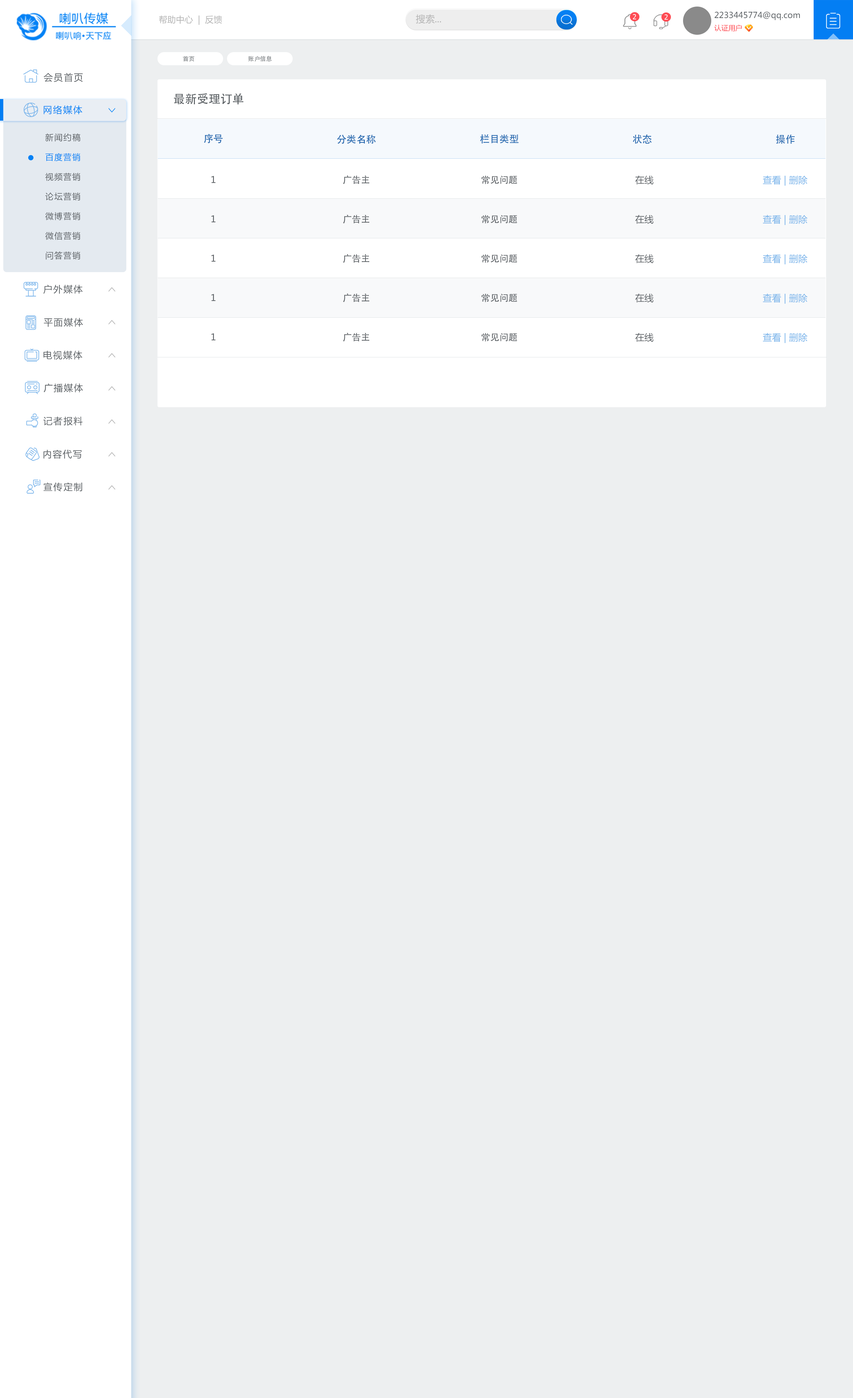
<style>
.page{position:relative;width:853px;height:1398px;background:#edeff0}
.page>*{position:absolute;margin:0}
.t1{font:8.6px "MicrosoftYaHei";color:#b4b4b4}
.t2{font:9.4px "MicrosoftYaHei";color:#b4b4b4}
.t3{font:6.9px "Tahoma";letter-spacing:0.1em;color:#ffffff;text-transform:uppercase}
.t4{font:8.2px/12.3px "MicrosoftYaHei";color:#5c6165}
.t5{font:7.1px/12.3px "MicrosoftYaHei";color:#fe4d55}
.t6{font:5.9px "AdobeHeitiStd-Regular";color:#878b8e}
.t7{font:9.2px "MicrosoftYaHei";letter-spacing:0.1em;color:#5c6165}
.t8{font:11.8px "AdobeHeitiStd-Regular";color:#5c6165}
.t9{font:9.2px "MicrosoftYaHei";letter-spacing:0.1em;color:#0582f5}
.t10{font:8.2px/19.7px "MicrosoftYaHei";letter-spacing:0.1em;color:#5c6165}
.t11{font:8.2px/19.7px "MicrosoftYaHei";letter-spacing:0.1em;color:#0381f5}
.t12{font:9.8px "AdobeHeitiStd-Regular";color:#276ab0;text-transform:uppercase}
.t13{font:9.2px/39.4px "MicrosoftYaHei";color:#5c6165}
.t14{font:9.2px/39.4px "AdobeHeitiStd-Regular";color:#5c6165}
.t15{font:9.2px/39.4px "MicrosoftYaHei";color:#7db6eb}
</style>
<div class="page">
<p class="t1" style="left:159px;top:15px;width:63px;height:10px">帮助中心  |  反馈</p>
<p class="t2" style="left:416px;top:14px;width:25px;height:10px">搜索...</p>
<p class="t3" style="left:633px;top:14px;width:3px;height:5px">2</p>
<p class="t3" style="left:664px;top:14px;width:4px;height:6px">2</p>
<p class="t4" style="left:714px;top:11px;width:86px;height:20px">2233445774@qq.com<br><span class="t5">认证用户</span></p>
<p class="t6" style="left:183px;top:56px;width:11px;height:6px">首页</p>
<p class="t6" style="left:248px;top:56px;width:24px;height:6px">账户信息</p>
<p class="t7" style="left:44px;top:73px;width:39px;height:9px">会员首页</p>
<p class="t8" style="left:174px;top:93px;width:69px;height:12px">最新受理订单</p>
<p class="t9" style="left:44px;top:105px;width:38px;height:9px">网络媒体</p>
<p class="t10" style="left:45px;top:133px;width:35px;height:127px">新闻约稿<br><span class="t11">百度营销<br></span>视频营销<br>论坛营销<br>微博营销<br>微信营销<br>问答营销</p>
<p class="t12" style="left:204px;top:134px;width:19px;height:9px">序号</p>
<p class="t12" style="left:337px;top:134px;width:39px;height:10px">分类名称</p>
<p class="t12" style="left:480px;top:134px;width:39px;height:10px">栏目类型</p>
<p class="t12" style="left:633px;top:134px;width:18px;height:10px">状态</p>
<p class="t12" style="left:776px;top:134px;width:19px;height:10px">操作</p>
<p class="t13" style="left:211px;top:176px;width:4px;height:164px">1<br>1<br>1<br>1<br>1</p>
<p class="t14" style="left:343px;top:175px;width:26px;height:167px">广告主<br>广告主<br>广告主<br>广告主<br>广告主</p>
<p class="t14" style="left:481px;top:175px;width:36px;height:167px">常见问题<br>常见问题<br>常见问题<br>常见问题<br>常见问题</p>
<p class="t13" style="left:635px;top:175px;width:18px;height:167px">在线<br>在线<br>在线<br>在线<br>在线</p>
<p class="t15" style="left:763px;top:175px;width:44px;height:168px">查看 | 删除<br>查看 | 删除<br>查看 | 删除<br>查看 | 删除<br>查看 | 删除</p>
<p class="t7" style="left:43px;top:285px;width:40px;height:9px">户外媒体</p>
<p class="t7" style="left:44px;top:318px;width:39px;height:9px">平面媒体</p>
<p class="t7" style="left:43px;top:351px;width:39px;height:9px">电视媒体</p>
<p class="t7" style="left:44px;top:383px;width:39px;height:10px">广播媒体</p>
<p class="t7" style="left:43px;top:417px;width:40px;height:9px">记者报料</p>
<p class="t7" style="left:43px;top:450px;width:39px;height:9px">内容代写</p>
<p class="t7" style="left:43px;top:482px;width:39px;height:10px">宣传定制</p>
</div>
